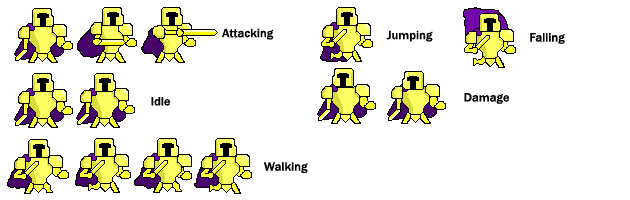
<style>
.page{position:relative;width:630px;height:200px;background:#ffffff}
.page>*{position:absolute;margin:0}
.t1{font:12.5px "FranklinGothic-Medium";color:#000000}
</style>
<div class="page">
<p class="t1" style="left:222px;top:28px;width:52px;height:12px">Attacking</p>
<p class="t1" style="left:386px;top:30px;width:47px;height:12px">Jumping</p>
<p class="t1" style="left:530px;top:33px;width:35px;height:11px">Falling</p>
<p class="t1" style="left:151px;top:97px;width:20px;height:9px">Idle</p>
<p class="t1" style="left:464px;top:93px;width:46px;height:11px">Damage</p>
<p class="t1" style="left:264px;top:162px;width:44px;height:11px">Walking</p>
</div>
